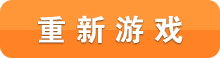
<style>
.page{position:relative;width:220px;height:58px;background:#ff9638}
.page>*{position:absolute;margin:0}
.t1{font:30px "Jdahei";letter-spacing:0.3em;color:#ffffff}
</style>
<div class="page">
<p class="t1" style="left:38px;top:15px;width:145px;height:29px">重新游戏</p>
</div>
